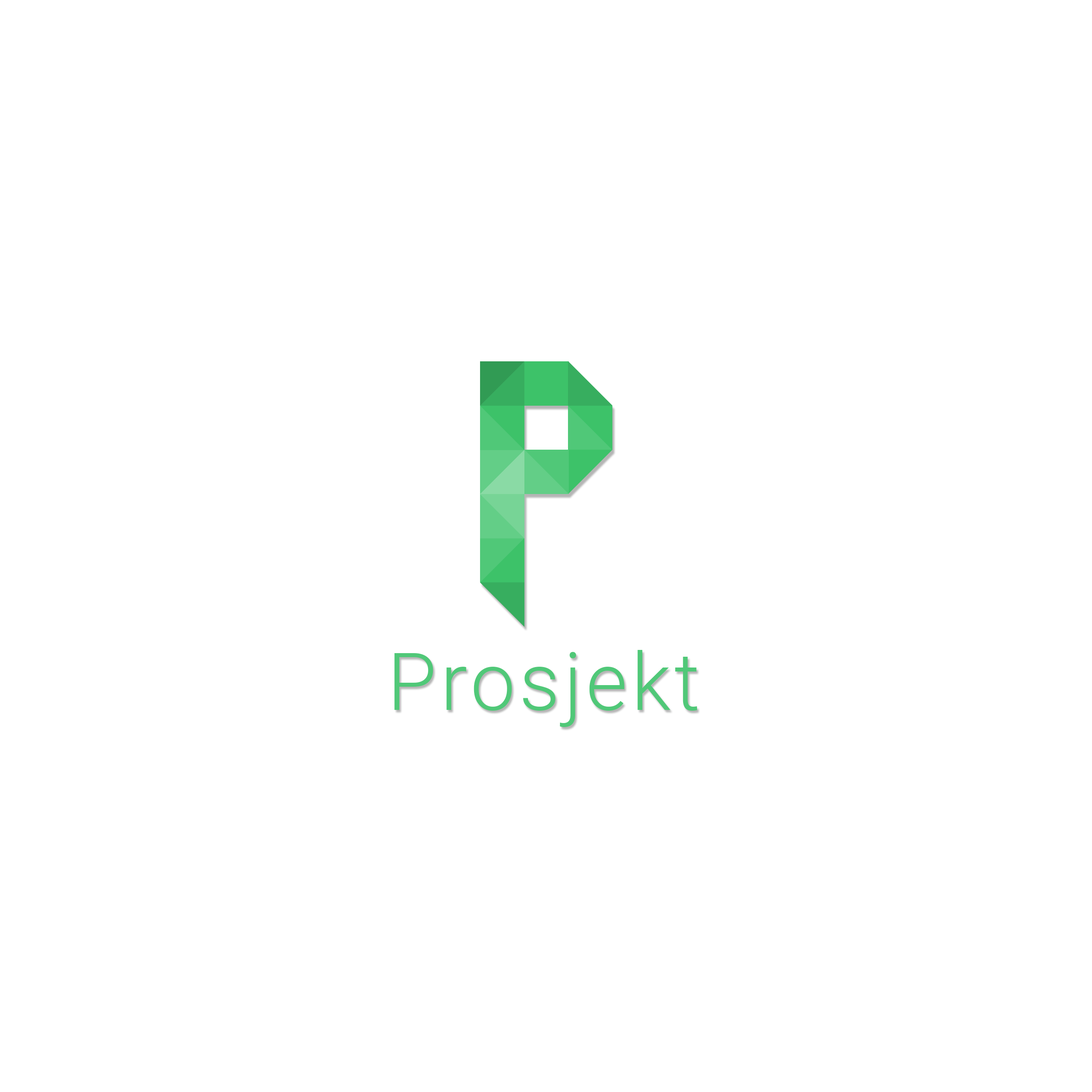
<style>
.page{position:relative;width:1092px;height:1092px;background:#ffffff}
.page>*{position:absolute;margin:0}
.t1{font:79.9px "Roboto-Light";letter-spacing:0.05em;color:#50c878}
</style>
<div class="page">
<p class="t1" style="left:394px;top:650px;width:303px;height:77px">Prosjekt</p>
</div>
